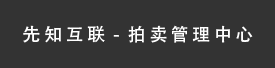
<style>
.page{position:relative;width:275px;height:68px;background:#333333}
.page>*{position:absolute;margin:0}
.t1{font:18px "AdobeHeitiStd-Regular";letter-spacing:0.2em;color:#ffffff}
</style>
<div class="page">
<p class="t1" style="left:23px;top:25px;width:230px;height:18px">先知互联-拍卖管理中心</p>
</div>
